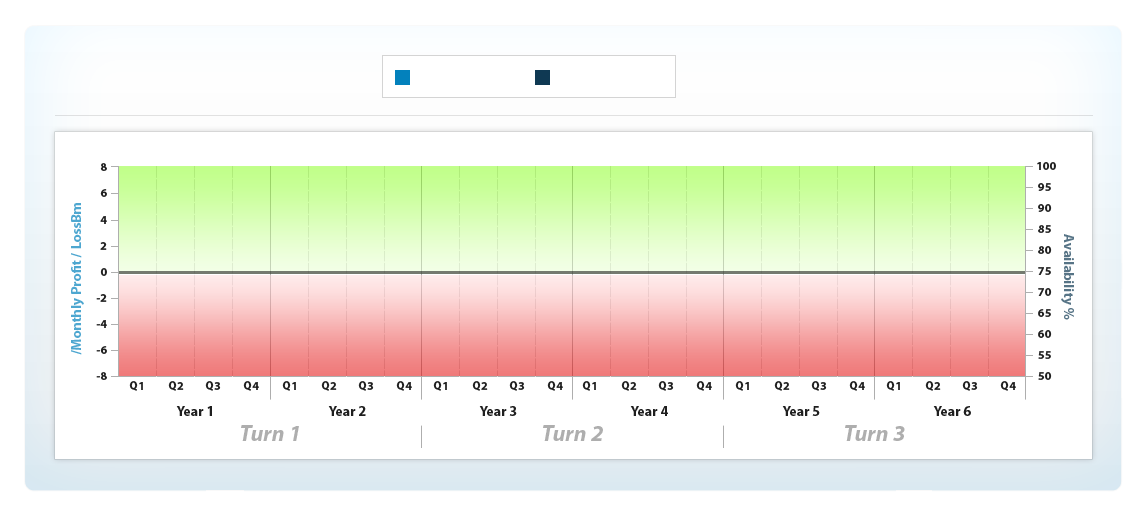
<style>
.page{position:relative;width:1148px;height:516px;background:#ffffff}
.page>*{position:absolute;margin:0}
.t1{font:12px "MyriadPro-Bold";color:#1f1f1f}
.t2{font:14px "MyriadPro-Bold";color:#4ea7d0}
.t3{font:14px "MyriadPro-Bold";color:#577486}
.t4{font:14px "MyriadPro-Bold";color:#1f1f1f}
.t5{font:23px "MyriadPro-BoldIt";color:#aeaeae}
</style>
<div class="page">
<p class="t1" style="left:100px;top:163px;width:7px;height:8px">8</p>
<p class="t1" style="left:1037px;top:162px;width:19px;height:8px">100</p>
<p class="t1" style="left:1038px;top:183px;width:13px;height:8px">95</p>
<p class="t1" style="left:100px;top:189px;width:7px;height:8px">6</p>
<p class="t2" style="left:71px;top:203px;width:13px;height:152px;rotate:-90deg">/Monthly Profit / LossBm</p>
<p class="t1" style="left:1038px;top:204px;width:14px;height:8px">90</p>
<p class="t1" style="left:100px;top:216px;width:7px;height:8px">4</p>
<p class="t1" style="left:1038px;top:225px;width:13px;height:8px">85</p>
<p class="t1" style="left:100px;top:242px;width:7px;height:8px">2</p>
<p class="t1" style="left:1038px;top:246px;width:14px;height:8px">80</p>
<p class="t3" style="left:1061px;top:234px;width:13px;height:86px;rotate:90deg">Availability %</p>
<p class="t1" style="left:100px;top:268px;width:7px;height:8px">0</p>
<p class="t1" style="left:1038px;top:267px;width:13px;height:8px">75</p>
<p class="t1" style="left:96px;top:294px;width:11px;height:8px">-2</p>
<p class="t1" style="left:1038px;top:288px;width:14px;height:8px">70</p>
<p class="t1" style="left:1038px;top:309px;width:13px;height:8px">65</p>
<p class="t1" style="left:96px;top:320px;width:11px;height:8px">-4</p>
<p class="t1" style="left:1038px;top:330px;width:14px;height:8px">60</p>
<p class="t1" style="left:96px;top:346px;width:11px;height:8px">-6</p>
<p class="t1" style="left:1038px;top:351px;width:13px;height:8px">55</p>
<p class="t1" style="left:96px;top:372px;width:11px;height:8px">-8</p>
<p class="t1" style="left:1038px;top:372px;width:14px;height:8px">50</p>
<p class="t1" style="left:129px;top:381px;width:14px;height:10px">Q1</p>
<p class="t1" style="left:168px;top:381px;width:16px;height:10px">Q2</p>
<p class="t1" style="left:205px;top:381px;width:16px;height:10px">Q3</p>
<p class="t1" style="left:243px;top:381px;width:16px;height:10px">Q4</p>
<p class="t1" style="left:282px;top:381px;width:14px;height:10px">Q1</p>
<p class="t1" style="left:321px;top:381px;width:16px;height:10px">Q2</p>
<p class="t1" style="left:358px;top:381px;width:16px;height:10px">Q3</p>
<p class="t1" style="left:396px;top:381px;width:16px;height:10px">Q4</p>
<p class="t1" style="left:433px;top:381px;width:14px;height:10px">Q1</p>
<p class="t1" style="left:472px;top:381px;width:16px;height:10px">Q2</p>
<p class="t1" style="left:509px;top:381px;width:16px;height:10px">Q3</p>
<p class="t1" style="left:547px;top:381px;width:16px;height:10px">Q4</p>
<p class="t1" style="left:582px;top:381px;width:14px;height:10px">Q1</p>
<p class="t1" style="left:621px;top:381px;width:16px;height:10px">Q2</p>
<p class="t1" style="left:658px;top:381px;width:16px;height:10px">Q3</p>
<p class="t1" style="left:696px;top:381px;width:16px;height:10px">Q4</p>
<p class="t1" style="left:735px;top:381px;width:14px;height:10px">Q1</p>
<p class="t1" style="left:774px;top:381px;width:16px;height:10px">Q2</p>
<p class="t1" style="left:811px;top:381px;width:16px;height:10px">Q3</p>
<p class="t1" style="left:849px;top:381px;width:16px;height:10px">Q4</p>
<p class="t1" style="left:886px;top:381px;width:14px;height:10px">Q1</p>
<p class="t1" style="left:925px;top:381px;width:16px;height:10px">Q2</p>
<p class="t1" style="left:962px;top:381px;width:16px;height:10px">Q3</p>
<p class="t1" style="left:1000px;top:381px;width:16px;height:10px">Q4</p>
<p class="t4" style="left:176px;top:406px;width:36px;height:10px">Year 1</p>
<p class="t4" style="left:328px;top:406px;width:38px;height:10px">Year 2</p>
<p class="t4" style="left:479px;top:406px;width:38px;height:10px">Year 3</p>
<p class="t4" style="left:630px;top:406px;width:38px;height:10px">Year 4</p>
<p class="t4" style="left:782px;top:406px;width:38px;height:10px">Year 5</p>
<p class="t4" style="left:933px;top:406px;width:38px;height:10px">Year 6</p>
<p class="t5" style="left:241px;top:425px;width:58px;height:16px">Turn 1</p>
<p class="t5" style="left:543px;top:425px;width:60px;height:16px">Turn 2</p>
<p class="t5" style="left:845px;top:425px;width:60px;height:16px">Turn 3</p>
</div>
